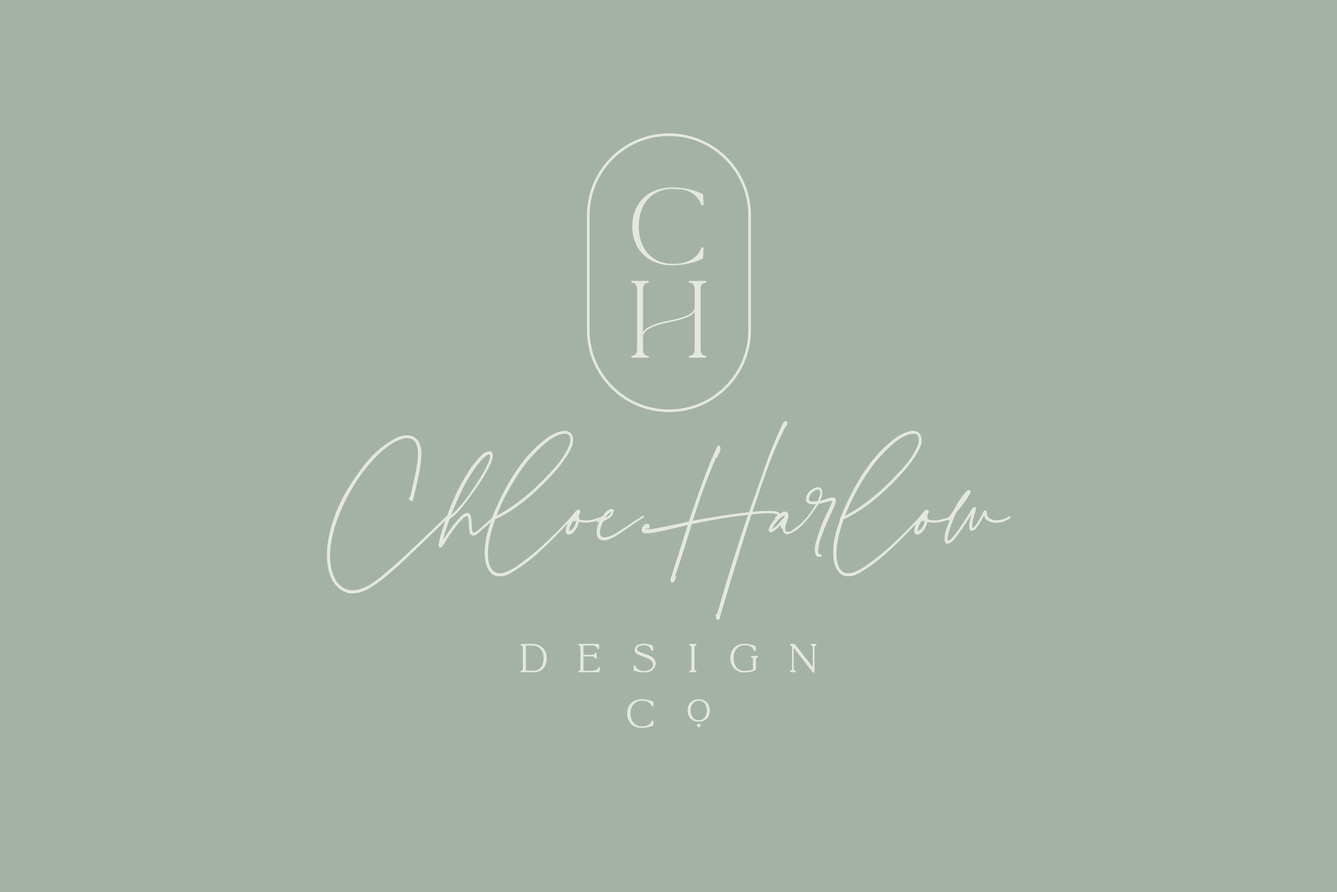
<style>
.page{position:relative;width:1337px;height:892px;background:#a4b1a7}
.page>*{position:absolute;margin:0}
.t1{font:95.8px/93.5px "LaLuxesSerif";color:#e4e7e0}
.t2{font:177.7px "LaLuxesScript";color:#e4e7e0}
.t3{font:177.7px "LaLuxesScript";letter-spacing:0.12em;color:#e4e7e0}
.t4{font:173.2px "LaLuxesScript";letter-spacing:-0.02em;color:#e4e7e0}
.t5{font:34.1px/55.3px "LaLuxesSerif";letter-spacing:0.9em;color:#e4e7e0;font-weight:bold}
</style>
<div class="page">
<p class="t1" style="left:631px;top:187px;width:76px;height:171px">c<br>h</p>
<p class="t2" style="left:327px;top:421px;width:684px;height:199px">Chlo<span class="t3">e</span><span class="t4">H</span>arlow</p>
<p class="t5" style="left:521px;top:643px;width:296px;height:85px;text-align:center">design<br>co</p>
</div>
